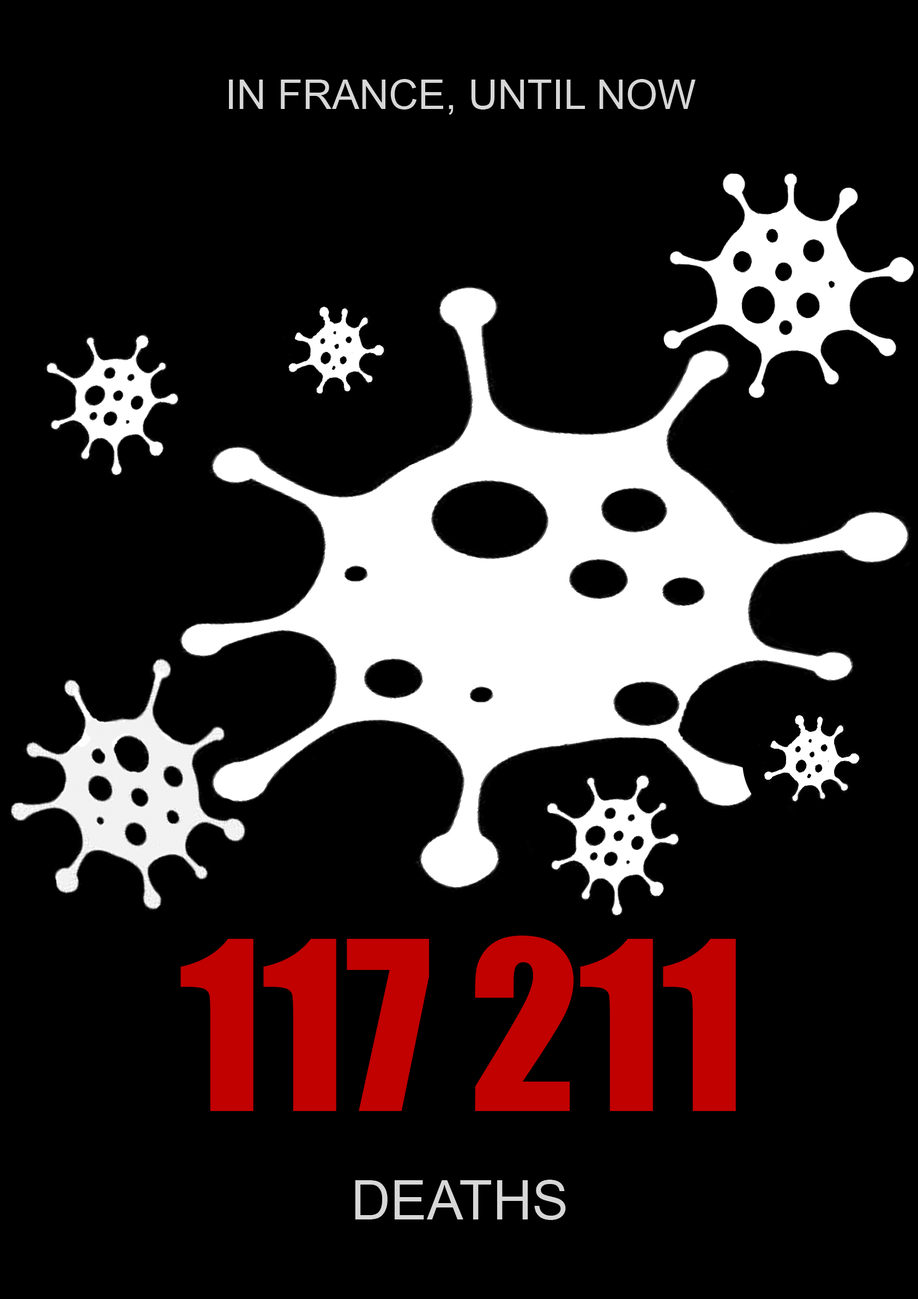
<style>
.page{position:relative;width:918px;height:1299px;background:#000000}
.page>*{position:absolute;margin:0}
.t1{font:40.9px "ArialMT";color:#d7d7d7}
.t2{font:218px "Impact";color:#c10000}
.t3{font:54.5px "ArialMT";color:#d7d7d7}
</style>
<div class="page">
<p class="t1" style="left:229px;top:79px;width:466px;height:36px">IN FRANCE, UNTIL NOW</p>
<p class="t2" style="left:180px;top:936px;width:556px;height:175px">117 211</p>
<p class="t3" style="left:355px;top:1180px;width:211px;height:40px">DEATHS</p>
</div>
